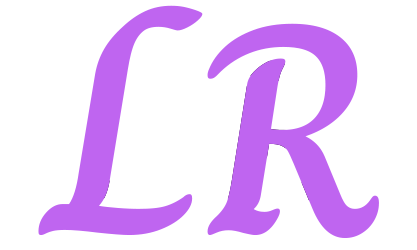
<style>
.page{position:relative;width:417px;height:250px;background:#ffffff}
.page>*{position:absolute;margin:0}
.t1{font:300px "Charm-Bold";color:#bf65f0}
</style>
<div class="page">
<p class="t1" style="left:38px;top:5px;width:341px;height:233px">LR</p>
</div>
